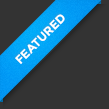
<style>
.page{position:relative;width:109px;height:109px;background:#333333}
.page>*{position:absolute;margin:0}
.t1{font:12px "Montserrat-Bold";color:#ffffff;text-transform:uppercase}
</style>
<div class="page">
<p class="t1" style="left:15px;top:14px;width:50px;height:50px;rotate:-45deg">featured</p>
</div>
